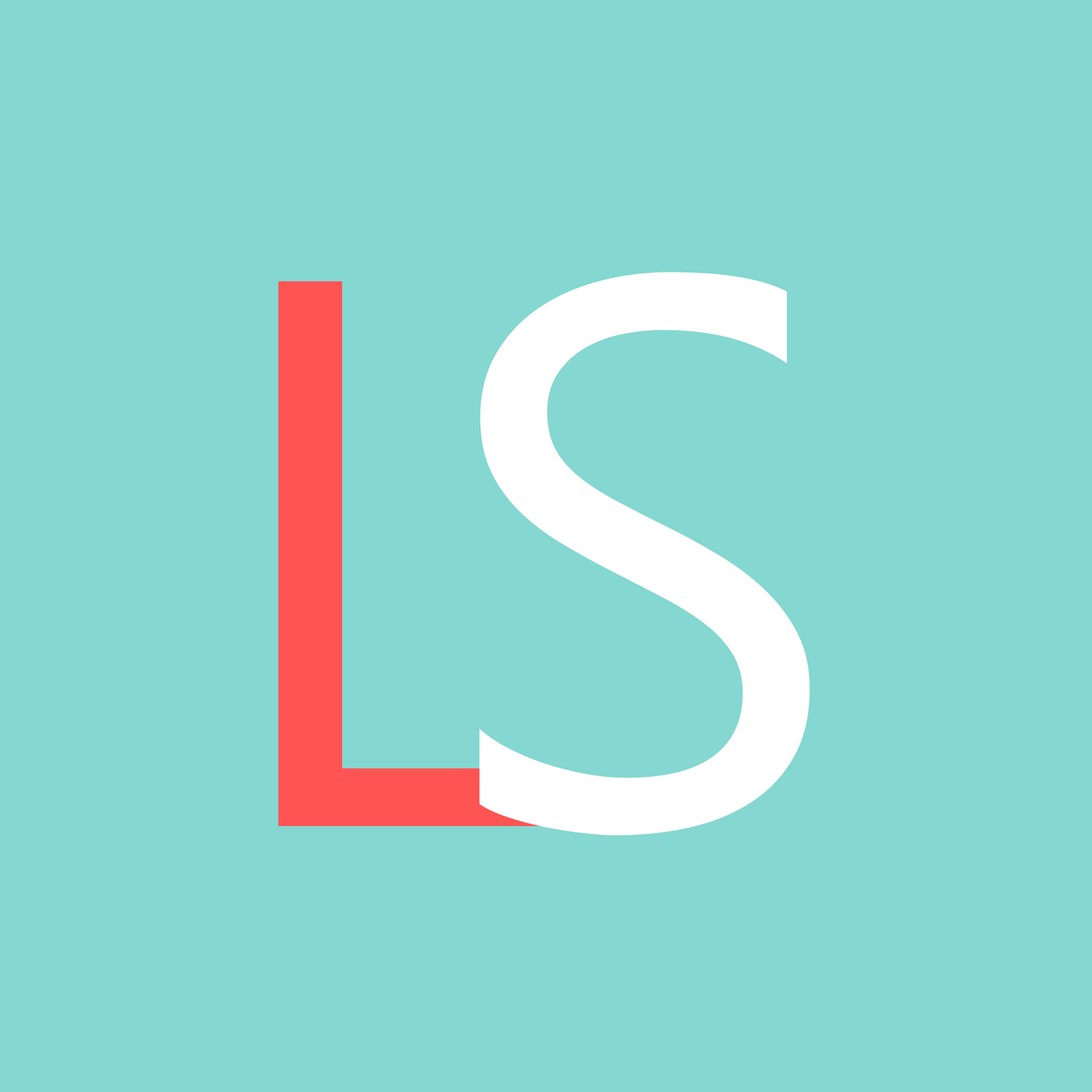
<style>
.page{position:relative;width:1092px;height:1092px;background:#85d7d1}
.page>*{position:absolute;margin:0}
.t1{font:778px "SegoeUI";letter-spacing:-0.18em;color:#ff5454}
.t2{font:778px "SegoeUI";letter-spacing:-0.18em;color:#ffffff}
</style>
<div class="page">
<p class="t1" style="left:278px;top:272px;width:532px;height:563px">L<span class="t2">S</span></p>
</div>
